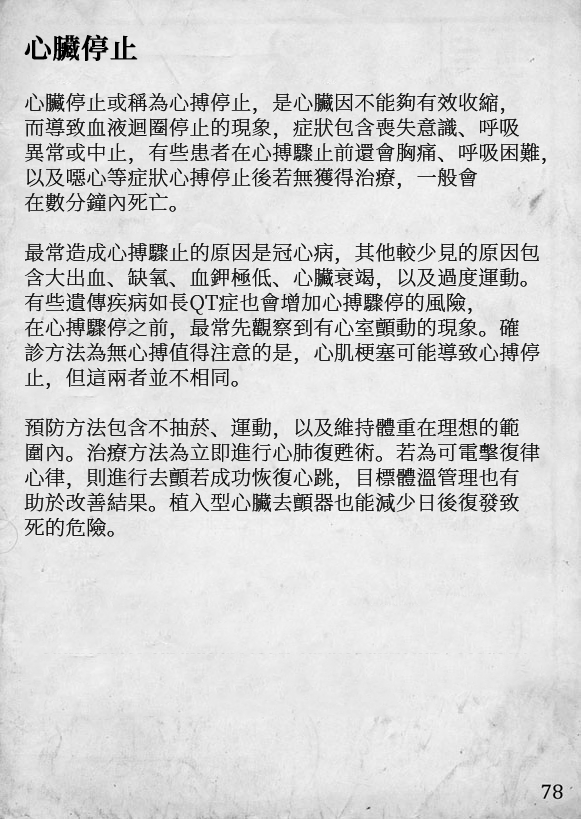
<style>
.page{position:relative;width:581px;height:819px}
.page>*{position:absolute;margin:0}
.t1{font:20.2px/25px "SourceHanSerifCN-ExtraLight";letter-spacing:0.02em;color:#111111}
.t2{font:27.2px/29px "SourceHanSerifCN-SemiBold";letter-spacing:0.02em;color:#000000;font-weight:bold}
</style>
<div class="page">
<p class="t1" style="left:24px;top:34px;width:522px;height:503px"><span class="t2">心臟停止<br><br></span>心臟停止或稱為心搏停止，是心臟因不能夠有效收縮，<br>而導致血液迴圈停止的現象，症狀包含喪失意識、呼吸<br>異常或中止，有些患者在心搏驟止前還會胸痛、呼吸困難，<br>以及噁心等症狀心搏停止後若無獲得治療，一般會<br>在數分鐘內死亡。<br><br>最常造成心搏驟止的原因是冠心病，其他較少見的原因包<br>含大出血、缺氧、血鉀極低、心臟衰竭，以及過度運動。<br>有些遺傳疾病如長QT症也會增加心搏驟停的風險，<br>在心搏驟停之前，最常先觀察到有心室顫動的現象。確<br>診方法為無心搏值得注意的是，心肌梗塞可能導致心搏停<br>止，但這兩者並不相同。<br><br>預防方法包含不抽菸、運動，以及維持體重在理想的範<br>圍內。治療方法為立即進行心肺復甦術。若為可電擊復律<br>心律，則進行去顫若成功恢復心跳，目標體溫管理也有<br>助於改善結果。植入型心臟去顫器也能減少日後復發致<br>死的危險。</p>
</div>
